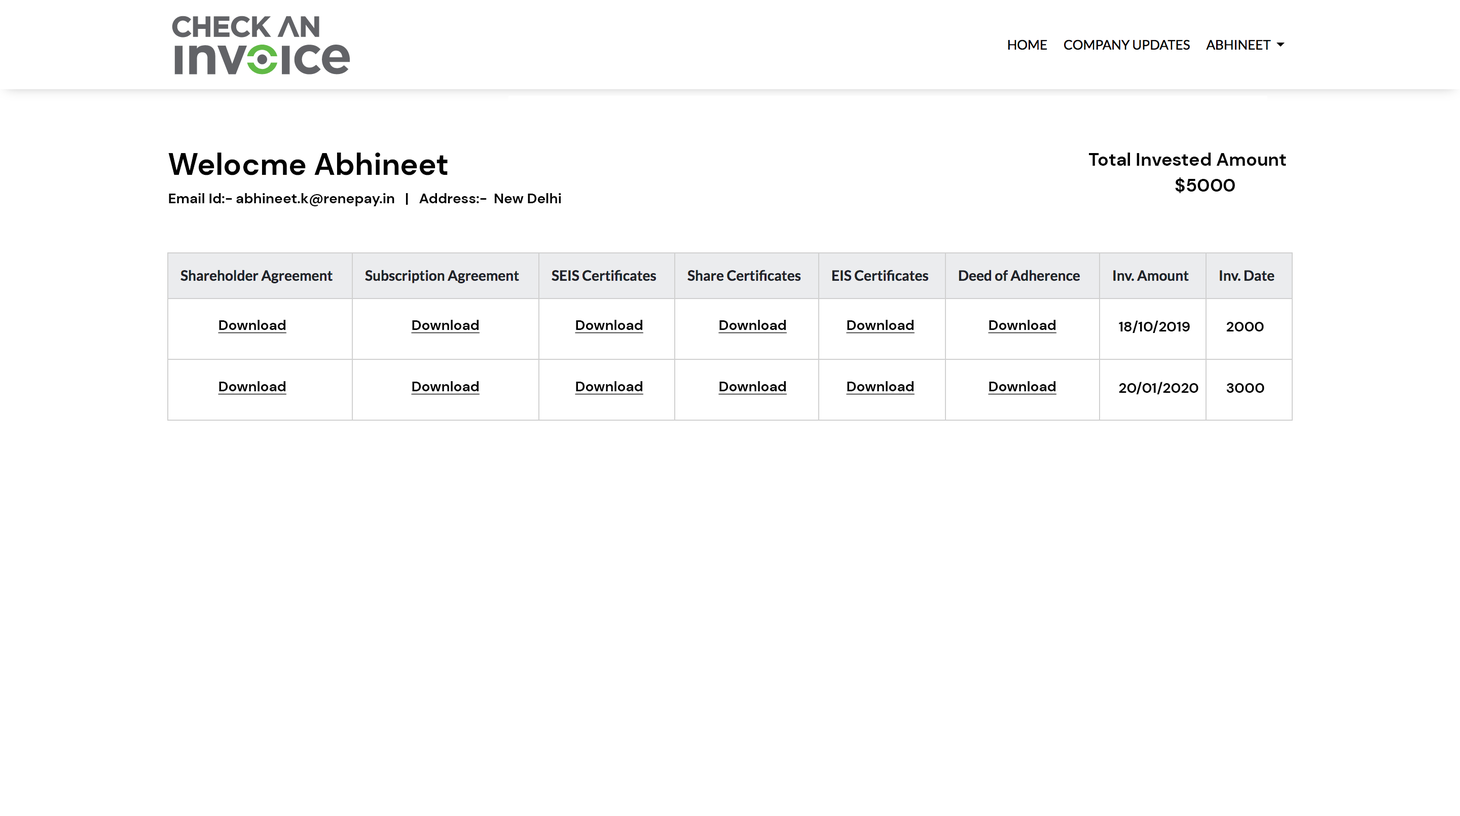
<style>
.page{position:relative;width:1460px;height:816px;background:#ffffff}
.page>*{position:absolute;margin:0}
.t1{font:30.4px "DMSans-Bold";color:#000000}
.t2{font:18.3px "DMSans-Bold";color:#000000}
.t3{font:14.2px "DMSans-Bold";color:#000000}
.t4{font:14.2px "DMSans-Bold";color:#000000;text-decoration:underline}
</style>
<div class="page">
<p class="t1" style="left:168px;top:153px;width:280px;height:22px">Welocme Abhineet</p>
<p class="t2" style="left:1089px;top:153px;width:198px;height:13px">Total Invested Amount</p>
<p class="t2" style="left:1175px;top:177px;width:60px;height:16px">$5000</p>
<p class="t3" style="left:169px;top:193px;width:392px;height:13px">Email Id:- abhineet.k@renepay.in   |   Address:-  New Delhi</p>
<p class="t4" style="left:218px;top:320px;width:69px;height:14px">Download</p>
<p class="t4" style="left:411px;top:320px;width:69px;height:14px">Download</p>
<p class="t4" style="left:575px;top:320px;width:69px;height:14px">Download</p>
<p class="t4" style="left:719px;top:320px;width:68px;height:14px">Download</p>
<p class="t4" style="left:846px;top:320px;width:69px;height:14px">Download</p>
<p class="t4" style="left:988px;top:320px;width:69px;height:14px">Download</p>
<p class="t3" style="left:1119px;top:320px;width:71px;height:13px">18/10/2019</p>
<p class="t3" style="left:1227px;top:322px;width:37px;height:10px">2000</p>
<p class="t4" style="left:218px;top:381px;width:69px;height:14px">Download</p>
<p class="t4" style="left:411px;top:381px;width:69px;height:14px">Download</p>
<p class="t4" style="left:575px;top:381px;width:69px;height:14px">Download</p>
<p class="t4" style="left:719px;top:381px;width:68px;height:14px">Download</p>
<p class="t4" style="left:846px;top:381px;width:69px;height:14px">Download</p>
<p class="t4" style="left:988px;top:381px;width:69px;height:14px">Download</p>
<p class="t3" style="left:1119px;top:382px;width:80px;height:13px">20/01/2020</p>
<p class="t3" style="left:1227px;top:383px;width:38px;height:10px">3000</p>
</div>
